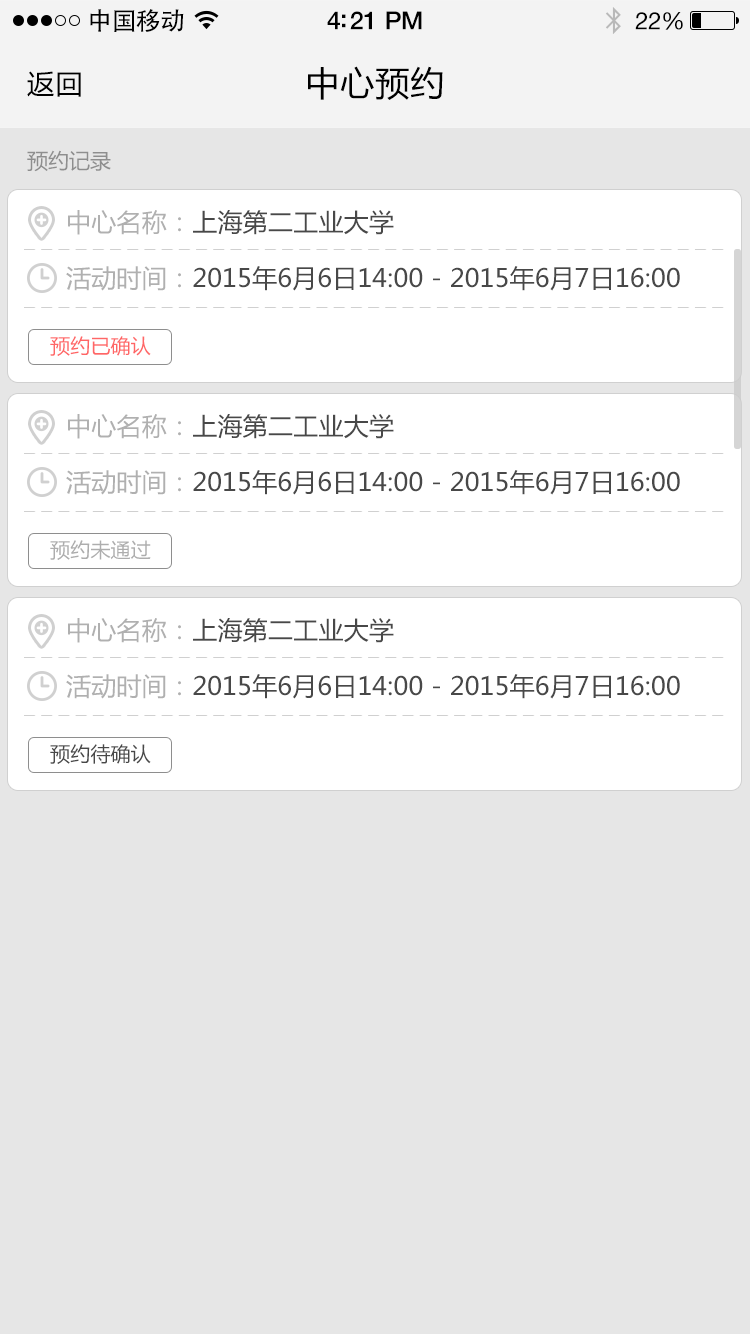
<style>
.page{position:relative;width:750px;height:1334px;background:#e6e6e6}
.page>*{position:absolute;margin:0}
.t1{font:25px "AdobeHeitiStd-Regular";letter-spacing:-0.025em;color:#000000}
.t2{font:25px "HelveticaNeue-Medium";letter-spacing:-0.02em;color:#000000}
.t3{font:24px "HelveticaNeue";letter-spacing:-0.02em;color:#000000}
.t4{font:27px "MicrosoftYaHei";letter-spacing:0.05em;color:#000000}
.t5{font:34px "MicrosoftYaHei";letter-spacing:0.03em;color:#000000}
.t6{font:21px "MicrosoftYaHei";color:#8e8e8e}
.t7{font:25px "MicrosoftYaHei";letter-spacing:0.01em;color:#484848}
.t8{font:25px "MicrosoftYaHei";letter-spacing:0.01em;color:#b0b0b0}
.t9{font:20px "MicrosoftYaHei";letter-spacing:0.01em;color:#ff6666}
.t10{font:20px "MicrosoftYaHei";letter-spacing:0.01em;color:#adadad}
.t11{font:20px "MicrosoftYaHei";letter-spacing:0.01em;color:#555555}
</style>
<div class="page">
<p class="t1" style="left:90px;top:9px;width:94px;height:23px">中国移动</p>
<p class="t2" style="left:327px;top:11px;width:95px;height:19px">4:21 PM</p>
<p class="t3" style="left:635px;top:12px;width:48px;height:18px">22%</p>
<p class="t4" style="left:27px;top:71px;width:54px;height:26px">返回</p>
<p class="t5" style="left:308px;top:66px;width:135px;height:34px">中心预约</p>
<p class="t6" style="left:27px;top:150px;width:84px;height:22px">预约记录</p>
<p class="t7" style="left:68px;top:210px;width:326px;height:25px"><span class="t8">中心名称：</span>上海第二工业大学</p>
<p class="t7" style="left:66px;top:266px;width:614px;height:25px"><span class="t8">活动时间：</span>2015年6月6日14:00 - 2015年6月7日16:00</p>
<p class="t9" style="left:50px;top:336px;width:101px;height:20px">预约已确认</p>
<p class="t7" style="left:68px;top:414px;width:326px;height:25px"><span class="t8">中心名称：</span>上海第二工业大学</p>
<p class="t7" style="left:66px;top:470px;width:614px;height:25px"><span class="t8">活动时间：</span>2015年6月6日14:00 - 2015年6月7日16:00</p>
<p class="t10" style="left:50px;top:540px;width:101px;height:20px">预约未通过</p>
<p class="t7" style="left:68px;top:618px;width:326px;height:25px"><span class="t8">中心名称：</span>上海第二工业大学</p>
<p class="t7" style="left:66px;top:674px;width:614px;height:25px"><span class="t8">活动时间：</span>2015年6月6日14:00 - 2015年6月7日16:00</p>
<p class="t11" style="left:50px;top:744px;width:101px;height:20px">预约待确认</p>
</div>
